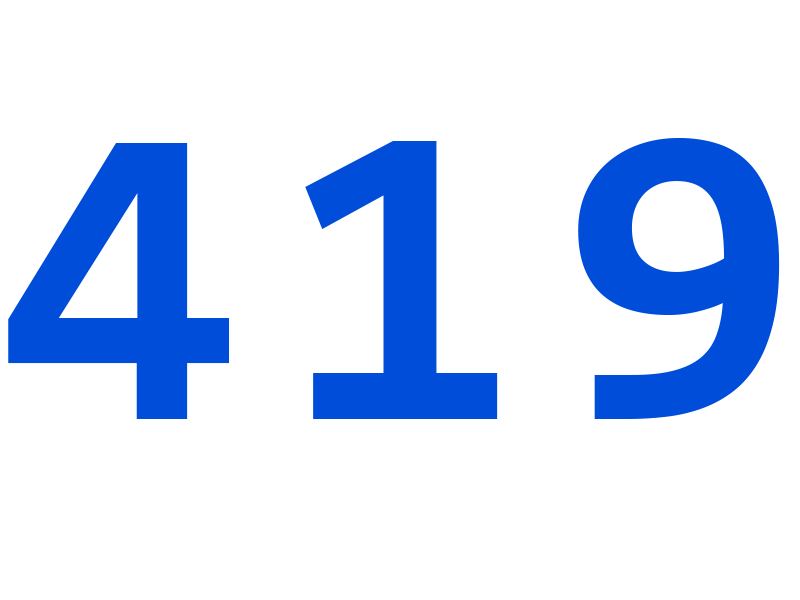
<style>
.page{position:relative;width:800px;height:600px;background:#ffffff}
.page>*{position:absolute;margin:0}
.t1{font:433px "Consolas-Bold";letter-spacing:0.1em;color:#004dda;text-transform:uppercase}
</style>
<div class="page">
<p class="t1" style="left:8px;top:138px;width:772px;height:281px">419</p>
</div>
